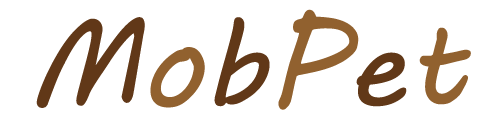
<style>
.page{position:relative;width:500px;height:120px;background:#ffffff}
.page>*{position:absolute;margin:0}
.t1{font:120px "MVBoli";color:#613818}
.t2{font:120px "MVBoli";color:#91612f}
</style>
<div class="page">
<p class="t1" style="left:36px;top:9px;width:435px;height:101px">M<span class="t2">o</span>b<span class="t2">P</span>e<span class="t2">t</span></p>
</div>
